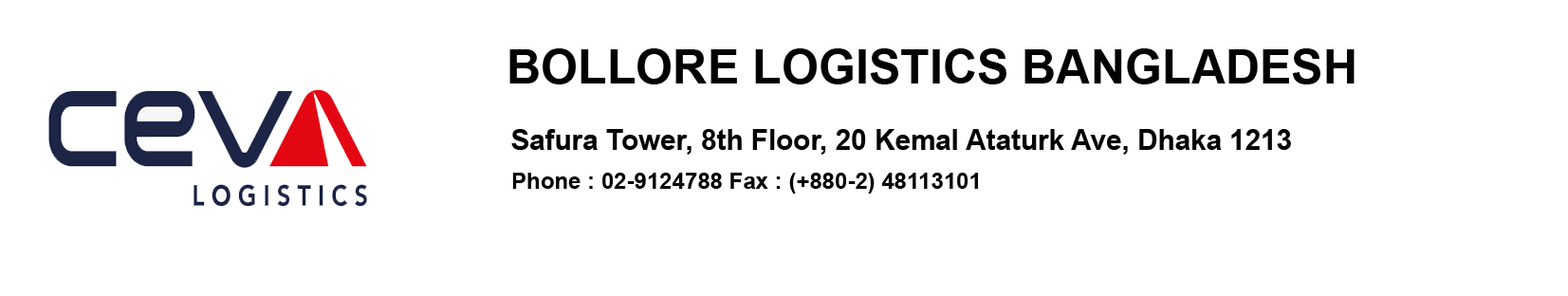
<style>
.page{position:relative;width:1568px;height:296px;background:#ffffff}
.page>*{position:absolute;margin:0}
.t1{font:47.6px "Arial-BoldMT";color:#020202}
.t2{font:29.7px "Arial-BoldMT";color:#020202;scale:0.95 1}
.t3{font:22.8px "Arial-BoldMT";color:#020202}
</style>
<div class="page">
<p class="t1" style="left:509px;top:48px;width:846px;height:36px">BOLLORE LOGISTICS BANGLADESH</p>
<p class="t2" style="left:511px;top:129px;width:780px;height:26px">Safura Tower, 8th Floor, 20 Kemal Ataturk Ave, Dhaka 1213</p>
<p class="t3" style="left:512px;top:173px;width:466px;height:21px">Phone : 02-9124788 Fax : (+880-2) 48113101</p>
</div>
